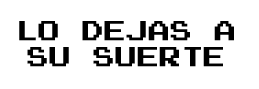
<style>
.page{position:relative;width:259px;height:89px;background:#ffffff}
.page>*{position:absolute;margin:0}
.t1{font:22px "PressStart2P";color:#000000}
</style>
<div class="page">
<p class="t1" style="left:19px;top:21px;width:215px;height:46px;text-align:center">LO DEJAS A<br>SU SUERTE</p>
</div>
